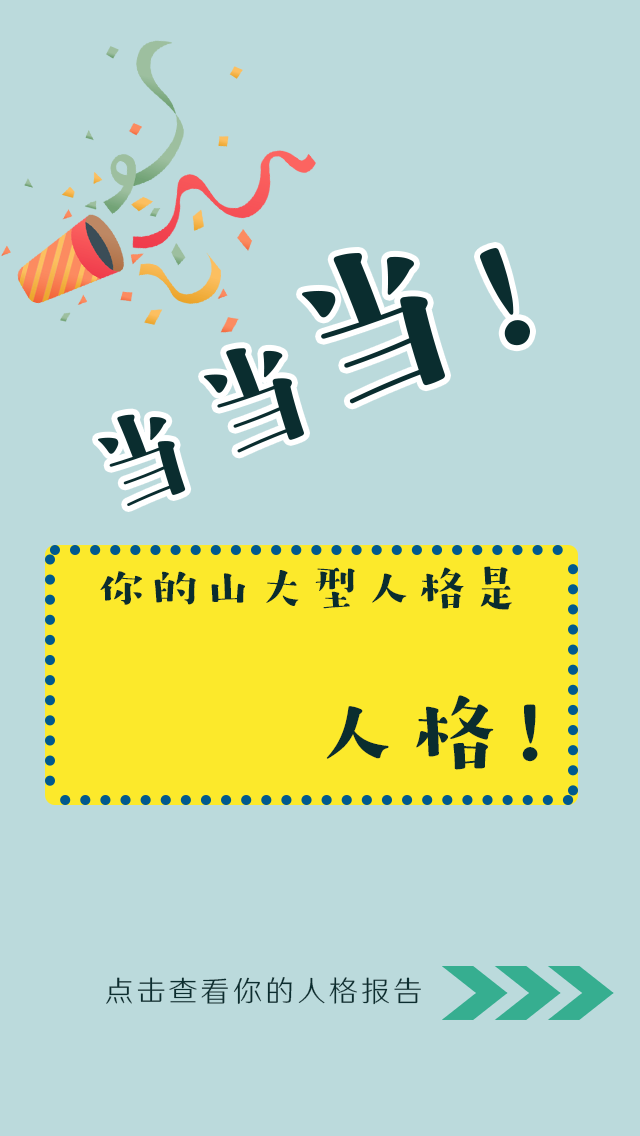
<style>
.page{position:relative;width:640px;height:1136px;background:#bbdadc}
.page>*{position:absolute;margin:0}
.t1{font:48.6px "HYZiYanHuanLeSongW";letter-spacing:0.1em;color:#0a2d2f}
.t2{font:87.5px "HYZiYanHuanLeSongW";letter-spacing:0.1em;color:#0a2d2f}
.t3{font:29.2px "HYWenHei-CEW";letter-spacing:0.1em;color:#0a2d2f}
</style>
<div class="page">
<p class="t1" style="left:100px;top:566px;width:412px;height:44px">你的山大型人格是——</p>
<p class="t2" style="left:326px;top:695px;width:212px;height:75px">人格！</p>
<p class="t3" style="left:106px;top:977px;width:315px;height:28px">点击查看你的人格报告</p>
</div>
